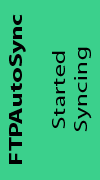
<style>
.page{position:relative;width:100px;height:180px;background:#3bd08c}
.page>*{position:absolute;margin:0}
.t1{font:18px "MyriadPro-Regular";color:#000000;scale:1.45 1}
.t2{font:18px "MyriadPro-Bold";color:#000000;scale:1.45 1}
</style>
<div class="page">
<p class="t1" style="left:9px;top:14px;width:83px;height:150px;text-align:center;rotate:-90deg"><span class="t2">FTPAutoSync<br></span><br>Started<br>Syncing</p>
</div>
